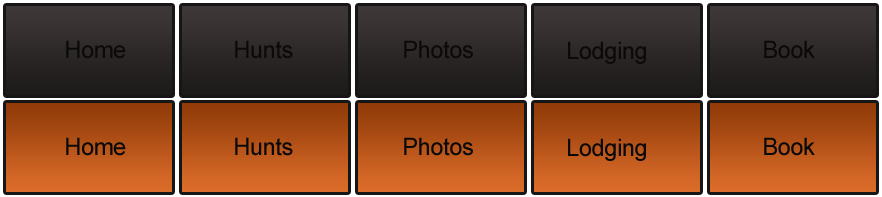
<style>
.page{position:relative;width:882px;height:197px}
.page>*{position:absolute;margin:0}
.t1{font:24px "ArialMT";letter-spacing:-0.025em;color:#0b0909}
</style>
<div class="page">
<p class="t1" style="left:66px;top:40px;width:60px;height:19px">Home</p>
<p class="t1" style="left:235px;top:40px;width:58px;height:19px">Hunts</p>
<p class="t1" style="left:404px;top:40px;width:69px;height:19px">Photos</p>
<p class="t1" style="left:568px;top:41px;width:78px;height:23px">Lodging</p>
<p class="t1" style="left:764px;top:40px;width:51px;height:19px">Book</p>
<p class="t1" style="left:66px;top:137px;width:60px;height:19px">Home</p>
<p class="t1" style="left:235px;top:137px;width:58px;height:19px">Hunts</p>
<p class="t1" style="left:404px;top:137px;width:69px;height:19px">Photos</p>
<p class="t1" style="left:764px;top:137px;width:51px;height:19px">Book</p>
<p class="t1" style="left:568px;top:138px;width:78px;height:23px">Lodging</p>
</div>
